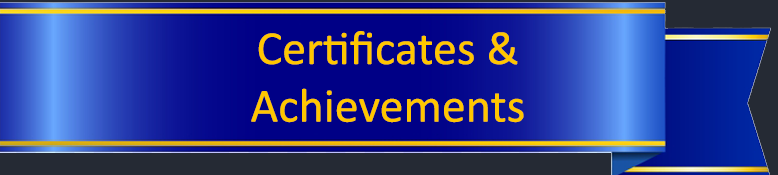
<style>
.page{position:relative;width:778px;height:175px}
.page>*{position:absolute;margin:0}
.t1{font:48px "Calibri";color:#ffc600}
</style>
<div class="page">
<p class="t1" style="left:251px;top:31px;width:273px;height:92px;text-align:center">Certificates &amp;<br>Achievements</p>
</div>
